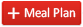
<style>
.page{position:relative;width:83px;height:27px}
.page>*{position:absolute;margin:0}
.t1{font:24px "Calibri";color:#ffffff;scale:1.1 1}
.t2{font:13.7px "Calibri";color:#ffffff;scale:0.95 1}
</style>
<div class="page">
<p class="t1" style="left:7px;top:7px;width:13px;height:12px">+</p>
<p class="t2" style="left:24px;top:7px;width:52px;height:11px">Meal Plan</p>
</div>
